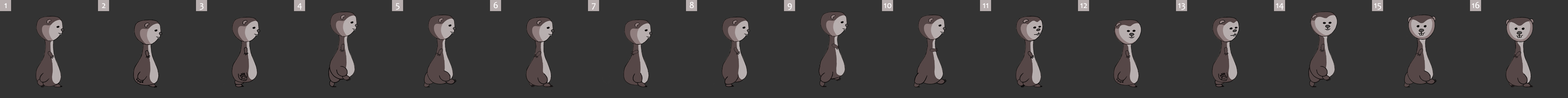
<style>
.page{position:relative;width:1568px;height:98px;background:#333333}
.page>*{position:absolute;margin:0}
.t1{font:9.2px "Candara";color:#fffefe}
</style>
<div class="page">
<p class="t1" style="left:4px;top:3px;width:3px;height:5px">1</p>
<p class="t1" style="left:102px;top:3px;width:4px;height:5px">2</p>
<p class="t1" style="left:199px;top:3px;width:5px;height:7px">3</p>
<p class="t1" style="left:297px;top:3px;width:5px;height:7px">4</p>
<p class="t1" style="left:396px;top:3px;width:4px;height:7px">5</p>
<p class="t1" style="left:493px;top:2px;width:5px;height:6px">6</p>
<p class="t1" style="left:592px;top:3px;width:4px;height:7px">7</p>
<p class="t1" style="left:689px;top:2px;width:5px;height:6px">8</p>
<p class="t1" style="left:787px;top:3px;width:5px;height:7px">9</p>
<p class="t1" style="left:884px;top:3px;width:8px;height:5px">10</p>
<p class="t1" style="left:983px;top:3px;width:5px;height:5px">11</p>
<p class="t1" style="left:1080px;top:3px;width:7px;height:5px">12</p>
<p class="t1" style="left:1178px;top:3px;width:7px;height:7px">13</p>
<p class="t1" style="left:1276px;top:3px;width:8px;height:7px">14</p>
<p class="t1" style="left:1374px;top:3px;width:7px;height:7px">15</p>
<p class="t1" style="left:1472px;top:2px;width:8px;height:6px">16</p>
</div>
